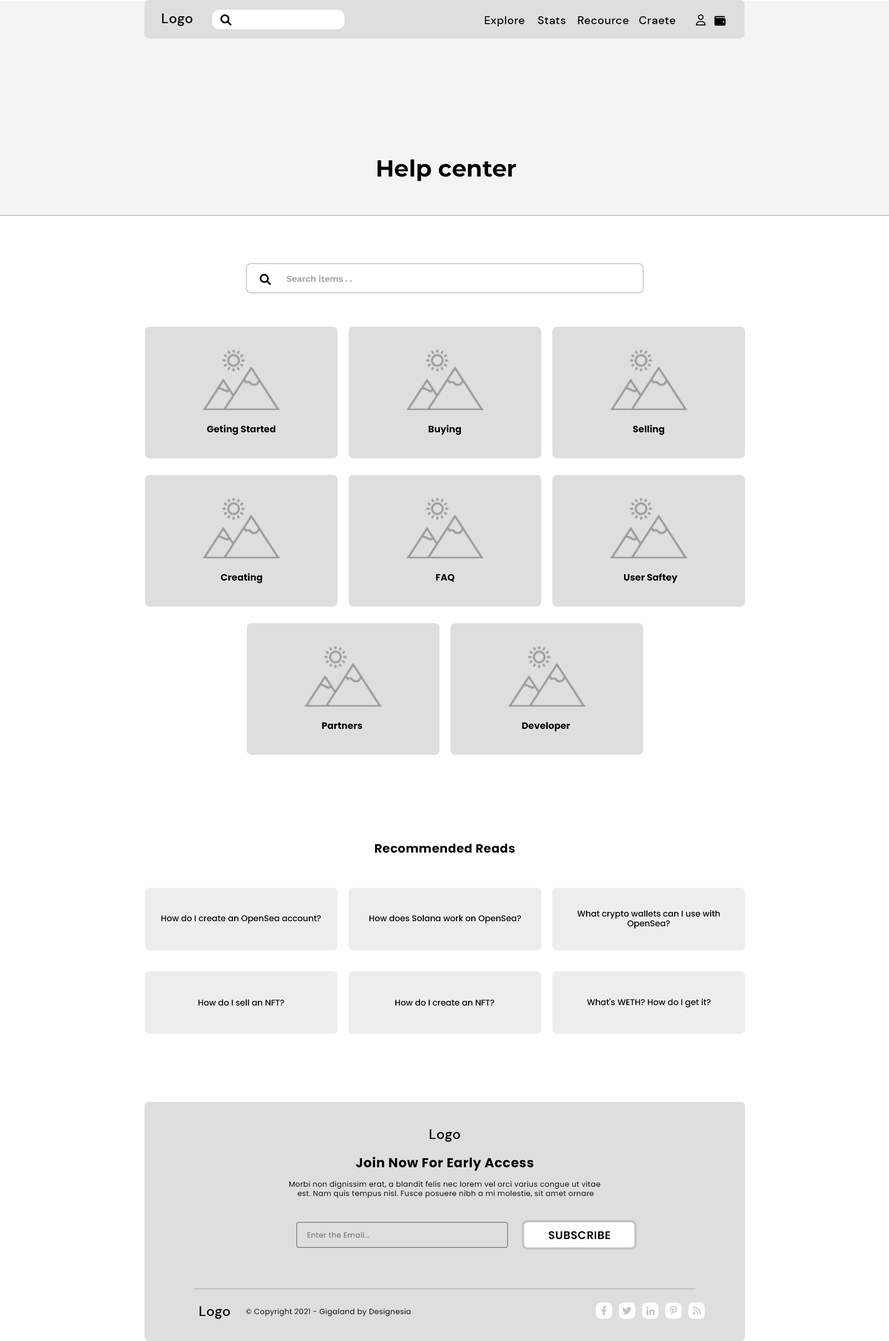
<style>
.page{position:relative;width:889px;height:1341px;background:#ffffff}
.page>*{position:absolute;margin:0}
.t1{font:13.9px "DMSans-Medium";letter-spacing:0.025em;color:#000000}
.t2{font:11.1px "DMSans-Medium";letter-spacing:0.025em;color:#000000}
.t3{font:23.2px "Montserrat-Bold";color:#000000}
.t4{font:8.3px "Montserrat-Bold";color:#a4a4a4}
.t5{font:9.3px "Poppins-Bold";color:#000000}
.t6{font:12px "Poppins-Bold";letter-spacing:0.025em;color:#000000}
.t7{font:8.3px "Poppins-Medium";color:#000000}
.t8{font:13px "Poppins-Bold";letter-spacing:0.025em;color:#000000}
.t9{font:7.4px "Poppins-Regular";letter-spacing:0.025em;color:#000000}
.t10{font:7.4px "Poppins-Regular";letter-spacing:0.025em;color:#6d6d6d}
.t11{font:11.1px "Poppins-SemiBold";letter-spacing:0.025em;color:#000000;text-transform:uppercase}
</style>
<div class="page">
<p class="t1" style="left:162px;top:13px;width:31px;height:13px">Logo</p>
<p class="t2" style="left:485px;top:16px;width:40px;height:10px">Explore</p>
<p class="t2" style="left:538px;top:16px;width:28px;height:8px">Stats</p>
<p class="t2" style="left:578px;top:16px;width:51px;height:8px">Recource</p>
<p class="t2" style="left:639px;top:16px;width:37px;height:8px">Craete</p>
<p class="t3" style="left:378px;top:159px;width:139px;height:22px">Help center</p>
<p class="t4" style="left:287px;top:275px;width:65px;height:7px">Search items . .</p>
<p class="t5" style="left:207px;top:425px;width:69px;height:10px">Geting Started</p>
<p class="t5" style="left:429px;top:425px;width:32px;height:10px">Buying</p>
<p class="t5" style="left:633px;top:425px;width:32px;height:10px">Selling</p>
<p class="t5" style="left:221px;top:573px;width:41px;height:10px">Creating</p>
<p class="t5" style="left:436px;top:574px;width:19px;height:8px">FAQ</p>
<p class="t5" style="left:624px;top:573px;width:54px;height:10px">User Saftey</p>
<p class="t5" style="left:322px;top:722px;width:40px;height:7px">Partners</p>
<p class="t5" style="left:522px;top:722px;width:48px;height:9px">Developer</p>
<p class="t6" style="left:375px;top:843px;width:140px;height:10px">Recommended Reads</p>
<p class="t7" style="left:161px;top:914px;width:160px;height:9px">How do I create an OpenSea account?</p>
<p class="t7" style="left:369px;top:914px;width:153px;height:9px">How does Solana work on OpenSea?</p>
<p class="t7" style="left:578px;top:910px;width:142px;height:18px;text-align:center">What crypto wallets can I use with <br>OpenSea?</p>
<p class="t7" style="left:198px;top:999px;width:86px;height:7px">How do I sell an NFT?</p>
<p class="t7" style="left:395px;top:999px;width:100px;height:7px">How do I create an NFT?</p>
<p class="t7" style="left:587px;top:998px;width:124px;height:10px">What's WETH? How do I get it?</p>
<p class="t1" style="left:430px;top:1129px;width:30px;height:12px">Logo</p>
<p class="t8" style="left:356px;top:1156px;width:178px;height:15px">Join Now For Early Access</p>
<p class="t9" style="left:289px;top:1180px;width:312px;height:18px;text-align:center">Morbi non dignissim erat, a blandit felis nec lorem vel orci varius congue ut vitae <br>est. Nam quis tempus nisl. Fusce posuere nibh a mi molestie, sit amet ornare</p>
<p class="t10" style="left:308px;top:1231px;width:62px;height:7px">Enter the Email...</p>
<p class="t11" style="left:549px;top:1231px;width:62px;height:8px">Subscribe</p>
<p class="t1" style="left:200px;top:1306px;width:30px;height:12px">Logo</p>
<p class="t9" style="left:246px;top:1308px;width:165px;height:8px">© Copyright 2021 - Gigaland by Designesia</p>
</div>
